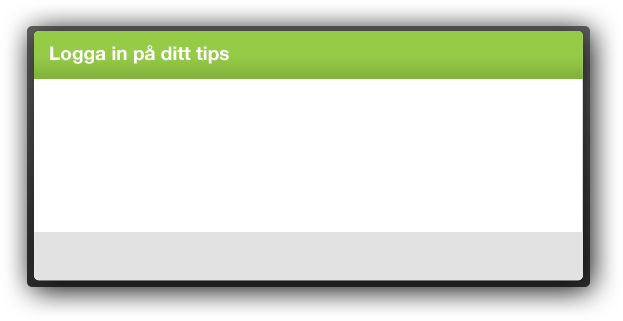
<style>
.page{position:relative;width:623px;height:321px;background:#ffffff}
.page>*{position:absolute;margin:0}
.t1{font:19.1px "HelveticaNeue-Bold";color:#ffffff}
</style>
<div class="page">
<p class="t1" style="left:50px;top:45px;width:179px;height:19px">Logga in på ditt tips</p>
</div>
